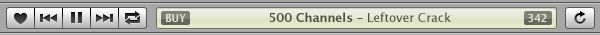
<style>
.page{position:relative;width:600px;height:35px;background:#a7a7a7}
.page>*{position:absolute;margin:0}
.t1{font:10px "LucidaGrande-Bold";color:#e8ebcf}
.t2{font:12px "LucidaGrande-Bold";color:#4d5044}
.t3{font:12px "LucidaGrande";color:#4d5044}
</style>
<div class="page">
<p class="t1" style="left:166px;top:14px;width:20px;height:8px">BUY</p>
<p class="t2" style="left:269px;top:12px;width:182px;height:10px">500 Channels – <span class="t3">Leftover Crack</span></p>
<p class="t1" style="left:528px;top:14px;width:19px;height:8px">342</p>
</div>
